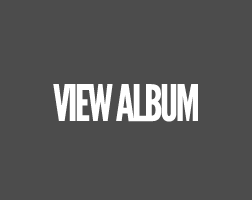
<style>
.page{position:relative;width:252px;height:200px;background:#4c4c4c}
.page>*{position:absolute;margin:0}
.t1{font:50px "LeagueGothic";letter-spacing:-0.05em;color:#ffffff}
</style>
<div class="page">
<p class="t1" style="left:53px;top:84px;width:145px;height:38px">VIEW ALBUM</p>
</div>
